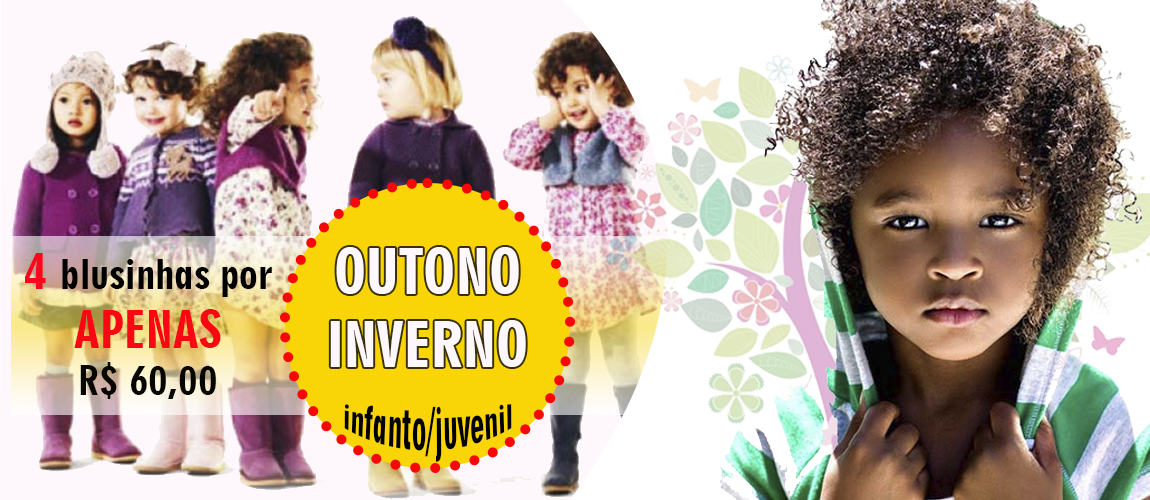
<style>
.page{position:relative;width:1150px;height:500px}
.page>*{position:absolute;margin:0}
.t1{font:39.3px "Geometric706BT-BlackCondensedB";color:#000000}
.t2{font:49.2px "Geometric706BT-BlackCondensedB";color:#f9071e}
.t3{font:49.2px "Geometric706BT-BlackCondensedB";color:#f90712}
.t4{font:39.3px "Geometric706BT-BlackCondensedB";color:#070600}
.t5{font:60.4px "Geometric706BT-BlackCondensedB";color:#fef8fc}
.t6{font:29.5px "Geometric706BT-BlackCondensedB";color:#000000}
</style>
<div class="page">
<p class="t1" style="left:25px;top:253px;width:247px;height:146px;text-align:center"><span class="t2">4 </span>blusinhas por<br><span class="t3">APENAS<br></span><span class="t4">R$ 60,00</span></p>
<p class="t5" style="left:330px;top:247px;width:196px;height:120px;text-align:center">OUTONO<br>INVERNO</p>
<p class="t6" style="left:344px;top:404px;width:168px;height:58px;text-align:center">infanto/juvenil</p>
</div>
